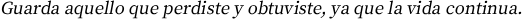
<style>
.page{position:relative;width:530px;height:20px;background:#ffffff}
.page>*{position:absolute;margin:0}
.t1{font:20px "OfficialFateFont-Medium";color:#000000;font-style:italic}
</style>
<div class="page">
<p class="t1" style="left:1px;top:0px;width:521px;height:19px">Guarda aquello que perdiste y obtuviste, ya que la vida continua.</p>
</div>
